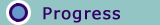
<style>
.page{position:relative;width:160px;height:25px;background:#94c5c5}
.page>*{position:absolute;margin:0}
.t1{font:16px "Verdana";letter-spacing:0.055em;color:#330066;font-weight:bold}
</style>
<div class="page">
<p class="t1" style="left:43px;top:7px;width:77px;height:16px">Progress</p>
</div>
